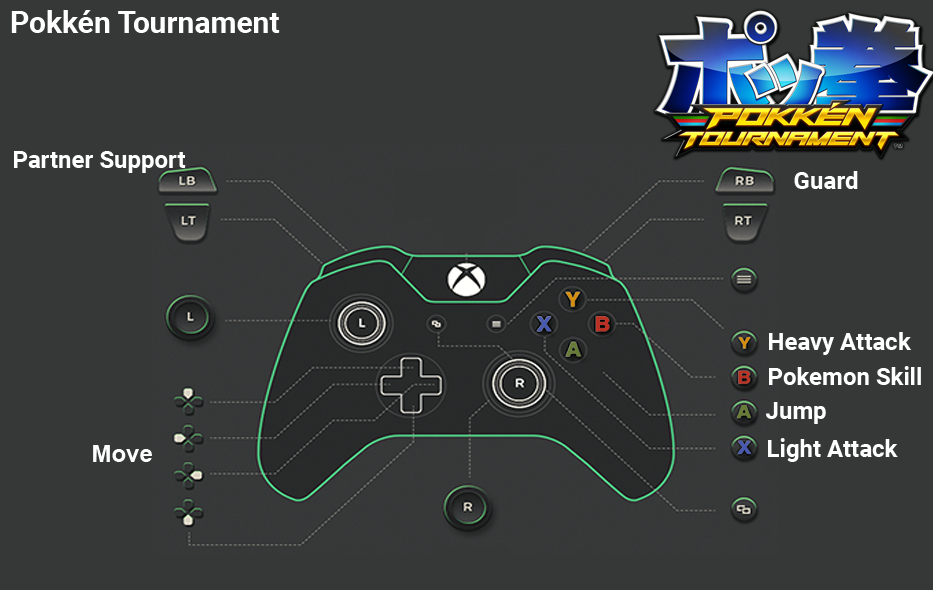
<style>
.page{position:relative;width:933px;height:590px;background:#363838}
.page>*{position:absolute;margin:0}
.t1{font:30px "Roboto-Bold";color:#ffffff}
.t2{font:24px "Roboto-Bold";color:#ffffff}
.t3{font:24px "Arial-BoldMT";color:#fefefe}
</style>
<div class="page">
<p class="t1" style="left:11px;top:10px;width:269px;height:23px">Pokkén Tournament</p>
<p class="t2" style="left:14px;top:151px;width:172px;height:22px">Partner Support</p>
<p class="t2" style="left:794px;top:171px;width:64px;height:18px">Guard</p>
<p class="t2" style="left:769px;top:332px;width:143px;height:23px">Heavy Attack</p>
<p class="t2" style="left:769px;top:366px;width:152px;height:19px">Pokemon Skill</p>
<p class="t2" style="left:766px;top:402px;width:60px;height:22px">Jump</p>
<p class="t2" style="left:768px;top:438px;width:130px;height:24px">Light Attack</p>
<p class="t3" style="left:93px;top:445px;width:59px;height:17px">Move</p>
</div>
